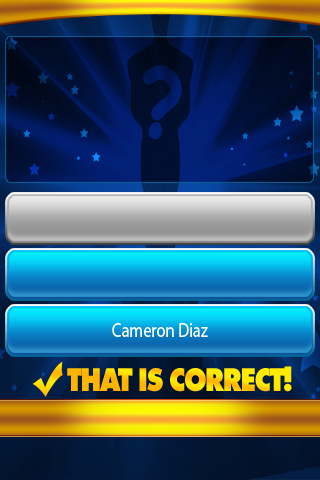
<style>
.page{position:relative;width:320px;height:480px}
.page>*{position:absolute;margin:0}
.t1{font:20px "MyriadPro-Regular";color:#ffffff;scale:0.83 1}
.t2{font:32.6px "IntrepidExtraBold";letter-spacing:-0.02em;scale:0.83 1}
</style>
<div class="page">
<p class="t1" style="left:112px;top:323px;width:96px;height:14px">Cameron Diaz</p>
<p class="t2" style="left:67px;top:366px;width:225px;height:26px">THAT IS CORRECT!</p>
</div>
